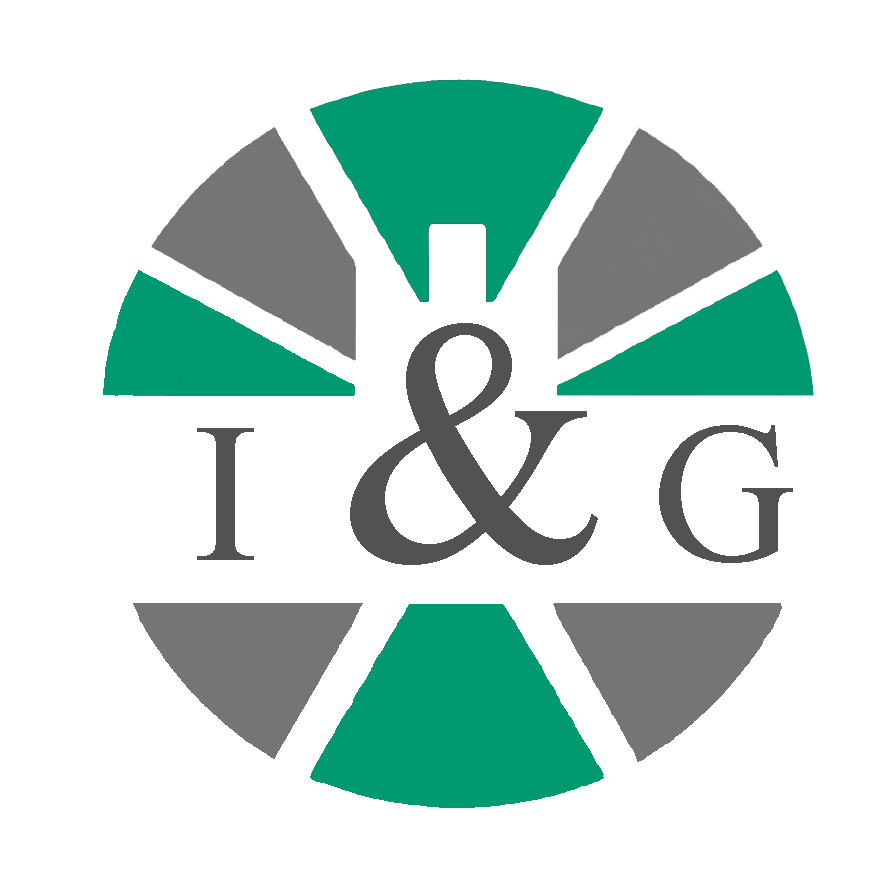
<style>
.page{position:relative;width:896px;height:880px;background:#ffffff}
.page>*{position:absolute;margin:0}
.t1{font:350px "MongolianBaiti";color:#525252}
.t2{font:200px "MongolianBaiti";color:#525252}
</style>
<div class="page">
<p class="t1" style="left:350px;top:323px;width:248px;height:242px">&amp;</p>
<p class="t2" style="left:659px;top:425px;width:134px;height:138px">G</p>
<p class="t2" style="left:197px;top:428px;width:57px;height:132px">I</p>
</div>
